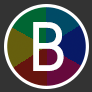
<style>
.page{position:relative;width:92px;height:92px;background:#333333}
.page>*{position:absolute;margin:0}
.t1{font:72.5px "Gidole-Regular";color:#ffffff;font-weight:bold}
</style>
<div class="page">
<p class="t1" style="left:33px;top:22px;width:31px;height:49px">B</p>
</div>
